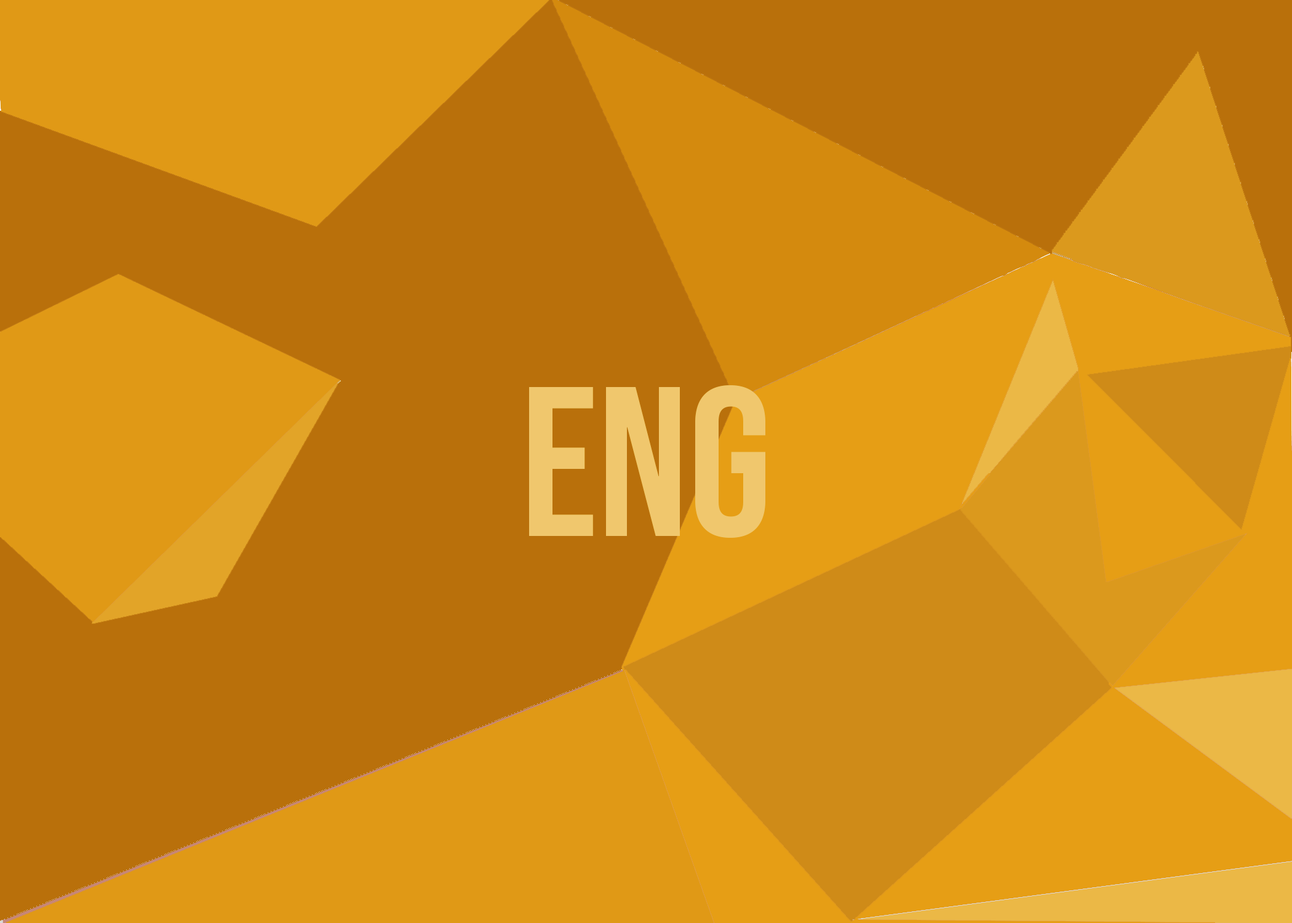
<style>
.page{position:relative;width:1292px;height:923px;background:#b9700b}
.page>*{position:absolute;margin:0}
.t1{font:212.8px "BebasNeue-Regular";color:#e6b973}
</style>
<div class="page">
<p class="t1" style="left:529px;top:385px;width:236px;height:153px">Eng</p>
</div>
